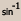
<style>
.page{position:relative;width:21px;height:21px;background:#d9cdc1}
.page>*{position:absolute;margin:0}
.t1{font:9px "Tahoma";color:#000000}
</style>
<div class="page">
<p class="t1" style="left:12px;top:2px;width:8px;height:7px">-1</p>
<p class="t1" style="left:2px;top:8px;width:11px;height:8px">sin</p>
</div>
